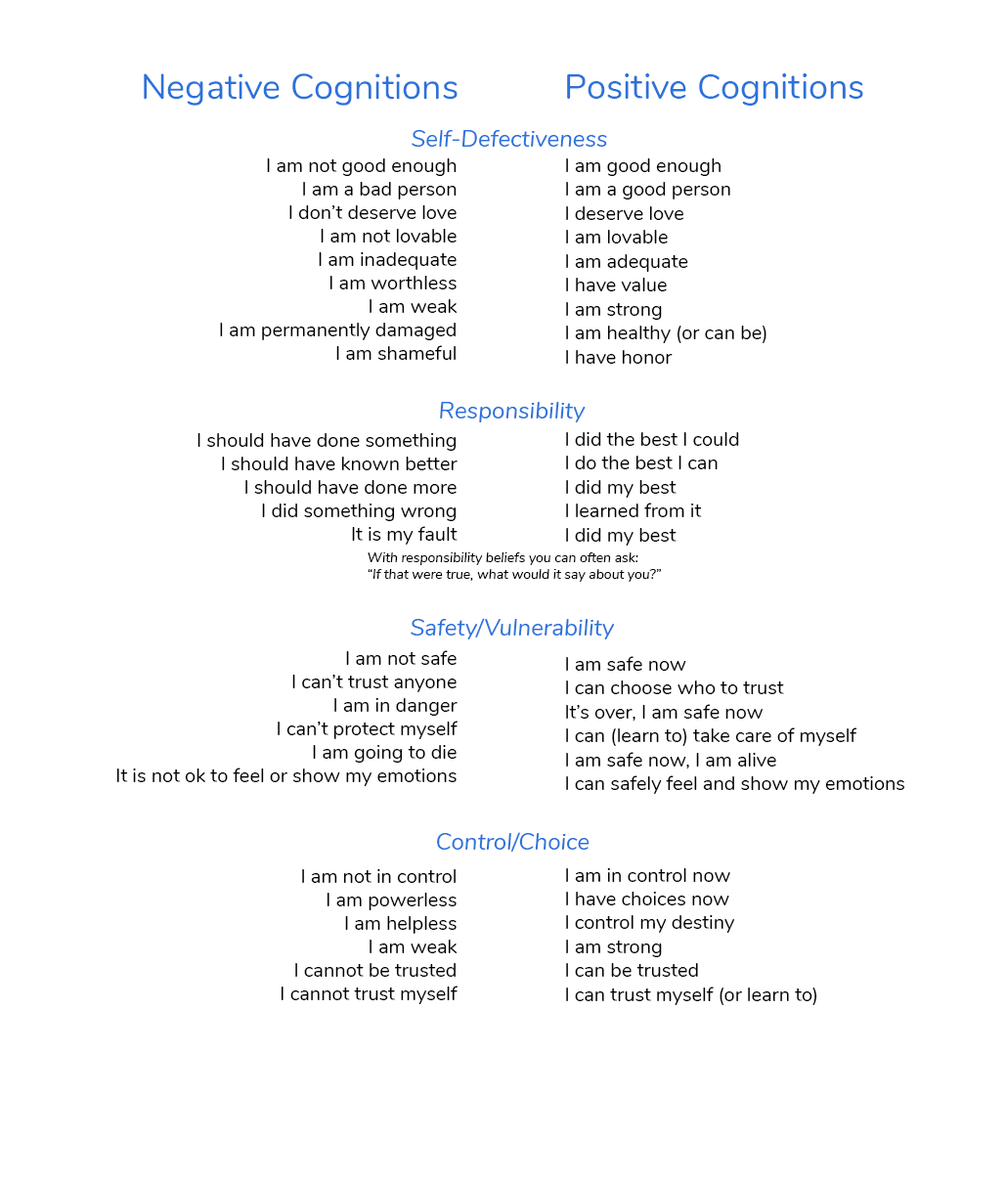
<style>
.page{position:relative;width:1006px;height:1185px;background:#ffffff}
.page>*{position:absolute;margin:0}
.t1{font:35.1px "Nunito-Regular";color:#2a72db}
.t2{font:34.8px "Nunito-Regular";color:#2a72db}
.t3{font:23.5px "Nunito-Italic";color:#2a72db}
.t4{font:19.6px "Nunito-Regular";color:#000000}
.t5{font:19.9px "Nunito-Regular";color:#000000}
.t6{font:13.7px "Nunito-Italic";color:#000000}
</style>
<div class="page">
<p class="t1" style="left:144px;top:73px;width:314px;height:33px">Negative Cognitions</p>
<p class="t2" style="left:567px;top:73px;width:296px;height:33px">Positive Cognitions</p>
<p class="t3" style="left:412px;top:130px;width:195px;height:17px">Self-Defectiveness</p>
<p class="t4" style="left:220px;top:158px;width:238px;height:202px;text-align:right">I am not good enough<br>I am a bad person<br>I don’t deserve love<br>I am not lovable<br>I am inadequate<br>I am worthless<br>I am weak<br>I am permanently damaged<br>I am shameful</p>
<p class="t5" style="left:566px;top:158px;width:201px;height:206px">I am good enough<br>I am a good person<br>I deserve love<br>I am lovable<br>I am adequate<br>I have value<br>I am strong<br>I am healthy (or can be)<br>I have honor</p>
<p class="t3" style="left:440px;top:402px;width:146px;height:20px">Responsibility</p>
<p class="t4" style="left:198px;top:433px;width:260px;height:112px;text-align:right">I should have done something<br>I should have known better<br>I should have done more<br>I did something wrong<br> It is my fault</p>
<p class="t5" style="left:566px;top:432px;width:173px;height:114px">I did the best I could<br>I do the best I can<br>I did my best<br>I learned from it<br>I did my best</p>
<p class="t6" style="left:368px;top:552px;width:293px;height:30px">With responsibility beliefs you can often ask:<br>“If that were true, what would it say about you?”</p>
<p class="t3" style="left:411px;top:618px;width:203px;height:21px">Safety/Vulnerability</p>
<p class="t4" style="left:116px;top:650px;width:342px;height:136px;text-align:right">I am not safe<br>I can’t trust anyone<br>I am in danger<br>I can’t protect myself<br>I am going to die<br>It is not ok to feel or show my emotions</p>
<p class="t5" style="left:566px;top:656px;width:338px;height:138px">I am safe now<br>I can choose who to trust<br>It’s over, I am safe now<br>I can (learn to) take care of myself<br>I am safe now, I am alive<br>I can safely feel and show my emotions</p>
<p class="t3" style="left:437px;top:832px;width:153px;height:20px">Control/Choice</p>
<p class="t4" style="left:281px;top:869px;width:177px;height:135px;text-align:right">I am not in control<br>I am powerless<br>I am helpless<br>I am weak<br>I cannot be trusted<br>I cannot trust myself</p>
<p class="t5" style="left:566px;top:868px;width:251px;height:137px">I am in control now<br>I have choices now<br>I control my destiny<br>I am strong<br>I can be trusted<br>I can trust myself (or learn to)</p>
</div>
